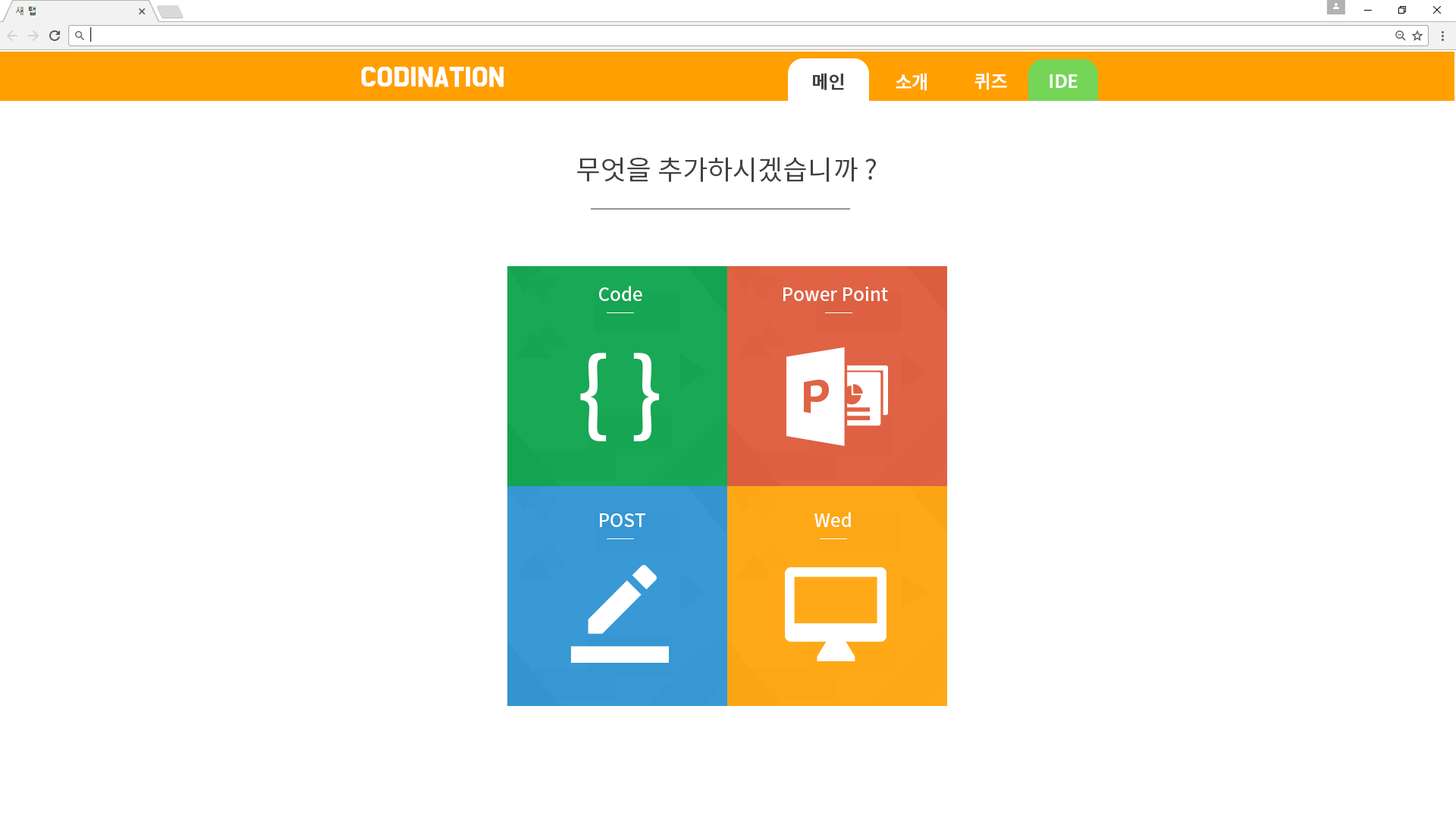
<style>
.page{position:relative;width:1456px;height:819px;background:#ffffff}
.page>*{position:absolute;margin:0}
.t1{font:22.7px "BMDoHyeon";color:#ffffff;font-weight:bold}
.t2{font:18.2px "NotoSansCJKkr-Bold";color:#424242}
.t3{font:18.2px "NotoSansCJKkr-Bold";color:#ffffff}
.t4{font:27.3px "NotoSansCJKkr-Regular";color:#424242}
.t5{font:18.2px "NotoSansCJKkr-Medium";color:#ffffff}
.t6{font:91px "NotoSansCJKkr-Medium";color:#ffffff}
</style>
<div class="page">
<p class="t1" style="left:361px;top:67px;width:143px;height:20px">CODINATION</p>
<p class="t2" style="left:813px;top:73px;width:31px;height:17px">메인</p>
<p class="t3" style="left:896px;top:73px;width:31px;height:18px">소개</p>
<p class="t3" style="left:974px;top:73px;width:33px;height:17px">퀴즈</p>
<p class="t3" style="left:1050px;top:74px;width:28px;height:14px">IDE</p>
<p class="t4" style="left:577px;top:157px;width:299px;height:25px">무엇을 추가하시겠습니까 ?</p>
<p class="t5" style="left:599px;top:286px;width:43px;height:15px">Code</p>
<p class="t5" style="left:783px;top:287px;width:105px;height:14px">Power Point</p>
<p class="t6" style="left:580px;top:353px;width:79px;height:88px">{ }</p>
<p class="t5" style="left:600px;top:513px;width:45px;height:14px">POST</p>
<p class="t5" style="left:814px;top:512px;width:37px;height:15px">Wed</p>
</div>
